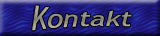
<style>
.page{position:relative;width:160px;height:36px}
.page>*{position:absolute;margin:0}
.t1{font:29px "TrebuchetMS";color:#949289;font-style:italic}
</style>
<div class="page">
<p class="t1" style="left:32px;top:5px;width:100px;height:26px">Kontakt</p>
</div>
